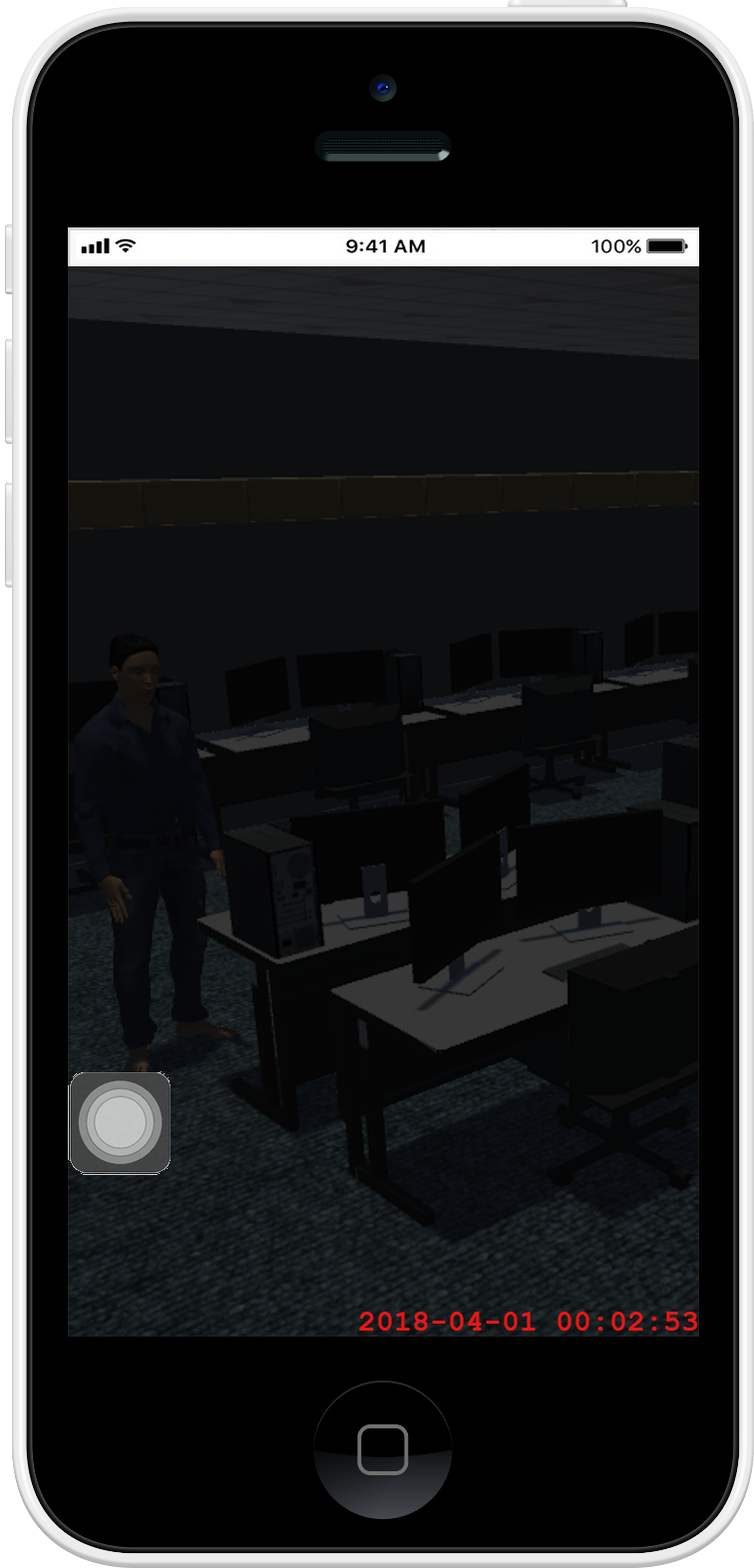
<style>
.page{position:relative;width:754px;height:1568px;background:#000000}
.page>*{position:absolute;margin:0}
.t1{font:29.9px "CourierNewPS-BoldMT";color:#e91616}
</style>
<div class="page">
<p class="t1" style="left:359px;top:1312px;width:338px;height:19px">2018-04-01 00:02:53</p>
</div>
